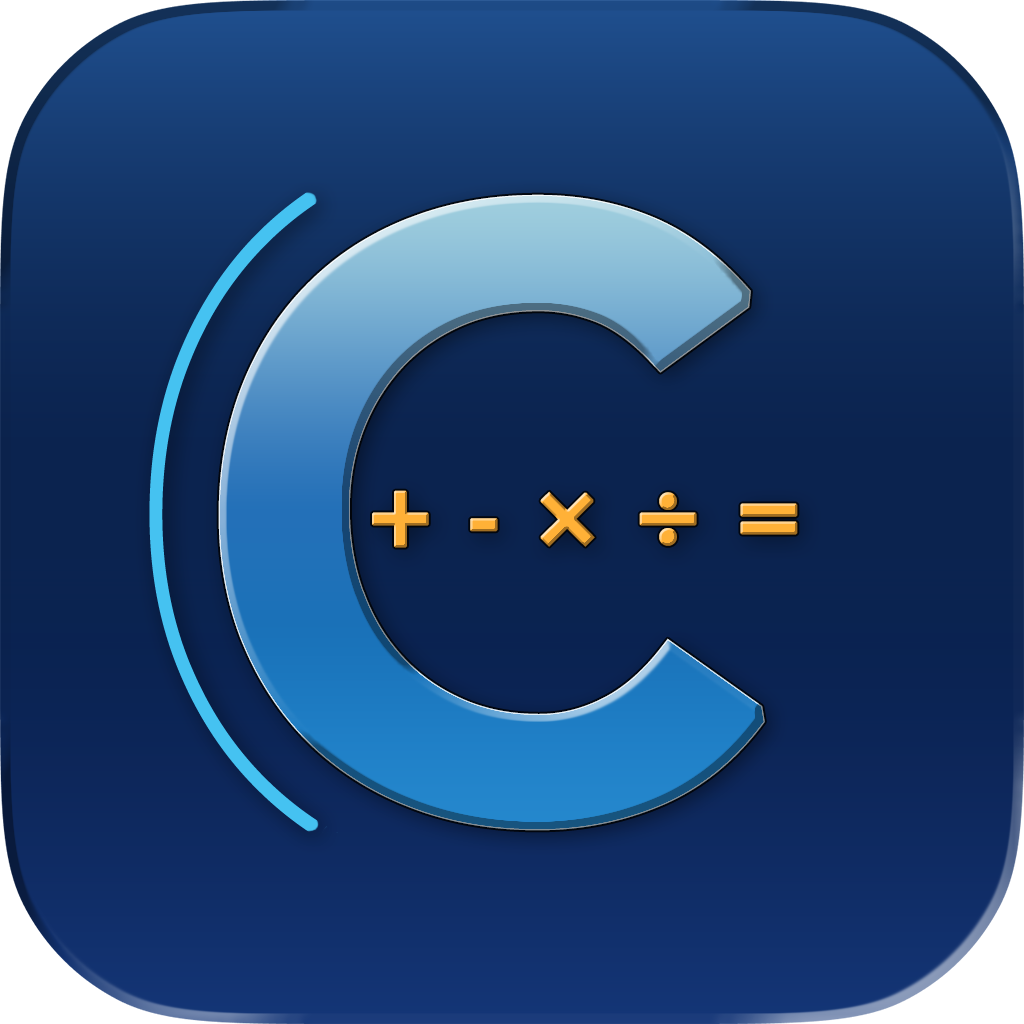
<style>
.page{position:relative;width:1024px;height:1024px}
.page>*{position:absolute;margin:0}
.t1{font:824px "Avenir-Heavy";font-weight:bold}
.t2{font:99.2px "Avenir-Heavy";color:#ffb137;font-weight:bold}
</style>
<div class="page">
<p class="t1" style="left:218px;top:194px;width:547px;height:637px">C</p>
<p class="t2" style="left:372px;top:490px;width:426px;height:58px">+ - × ÷ =</p>
</div>
